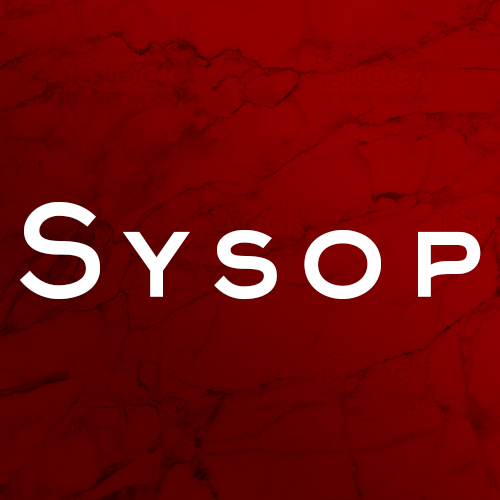
<style>
.page{position:relative;width:500px;height:500px}
.page>*{position:absolute;margin:0}
.t1{font:125px "Arkhip";letter-spacing:0.1em;color:#ffffff}
</style>
<div class="page">
<p class="t1" style="left:20px;top:202px;width:461px;height:98px">Sysop</p>
</div>
